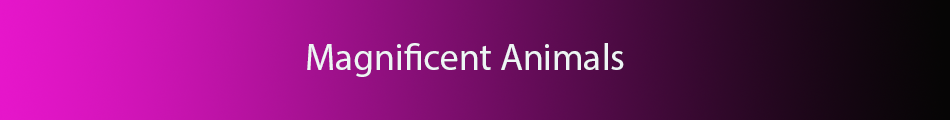
<style>
.page{position:relative;width:950px;height:120px}
.page>*{position:absolute;margin:0}
.t1{font:37.5px "MyriadPro-Regular";color:#eef5f5}
</style>
<div class="page">
<p class="t1" style="left:307px;top:43px;width:317px;height:34px">Magnificent Animals</p>
</div>
